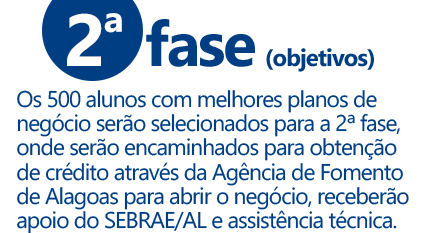
<style>
.page{position:relative;width:428px;height:233px;background:#ffffff}
.page>*{position:absolute;margin:0}
.t1{font:73.5px "SegoeWP-Bold";letter-spacing:-0.04em;color:#ffffff;text-transform:uppercase}
.t2{font:52px "SegoeWP-Bold";letter-spacing:-0.04em;color:#ffffff;text-transform:uppercase}
.t3{font:23.9px "SegoeWP-Bold";letter-spacing:-0.04em;color:#003e83}
.t4{font:62.5px "SegoeWP-Bold";letter-spacing:-0.04em;color:#003e83}
.t5{font:22.7px/24.3px "SegoeWP";letter-spacing:-0.04em;color:#003e83}
</style>
<div class="page">
<p class="t1" style="left:67px;top:13px;width:55px;height:53px">2<span class="t2">ª</span></p>
<p class="t3" style="left:146px;top:19px;width:228px;height:53px"><span class="t4">fase </span>(objetivos)</p>
<p class="t5" style="left:17px;top:90px;width:392px;height:144px">Os 500 alunos com melhores planos de <br>negócio serão selecionados para a 2ª fase,<br>onde serão encaminhados para obtenção<br>de crédito através da Agência de Fomento<br>de Alagoas para abrir o negócio, receberão <br>apoio do SEBRAE/AL e assistência técnica.</p>
</div>
